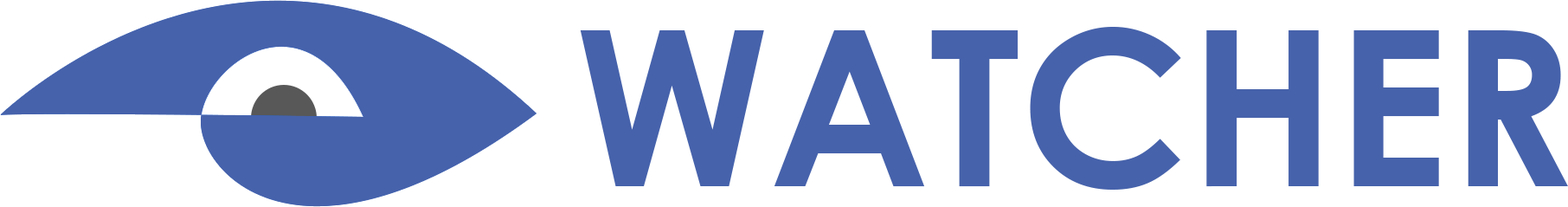
<style>
.page{position:relative;width:1568px;height:207px;background:#ffffff}
.page>*{position:absolute;margin:0}
.t1{font:216.3px "CenturyGothic-Bold";color:#4662ab}
</style>
<div class="page">
<p class="t1" style="left:580px;top:27px;width:988px;height:163px">WATCHER</p>
</div>
